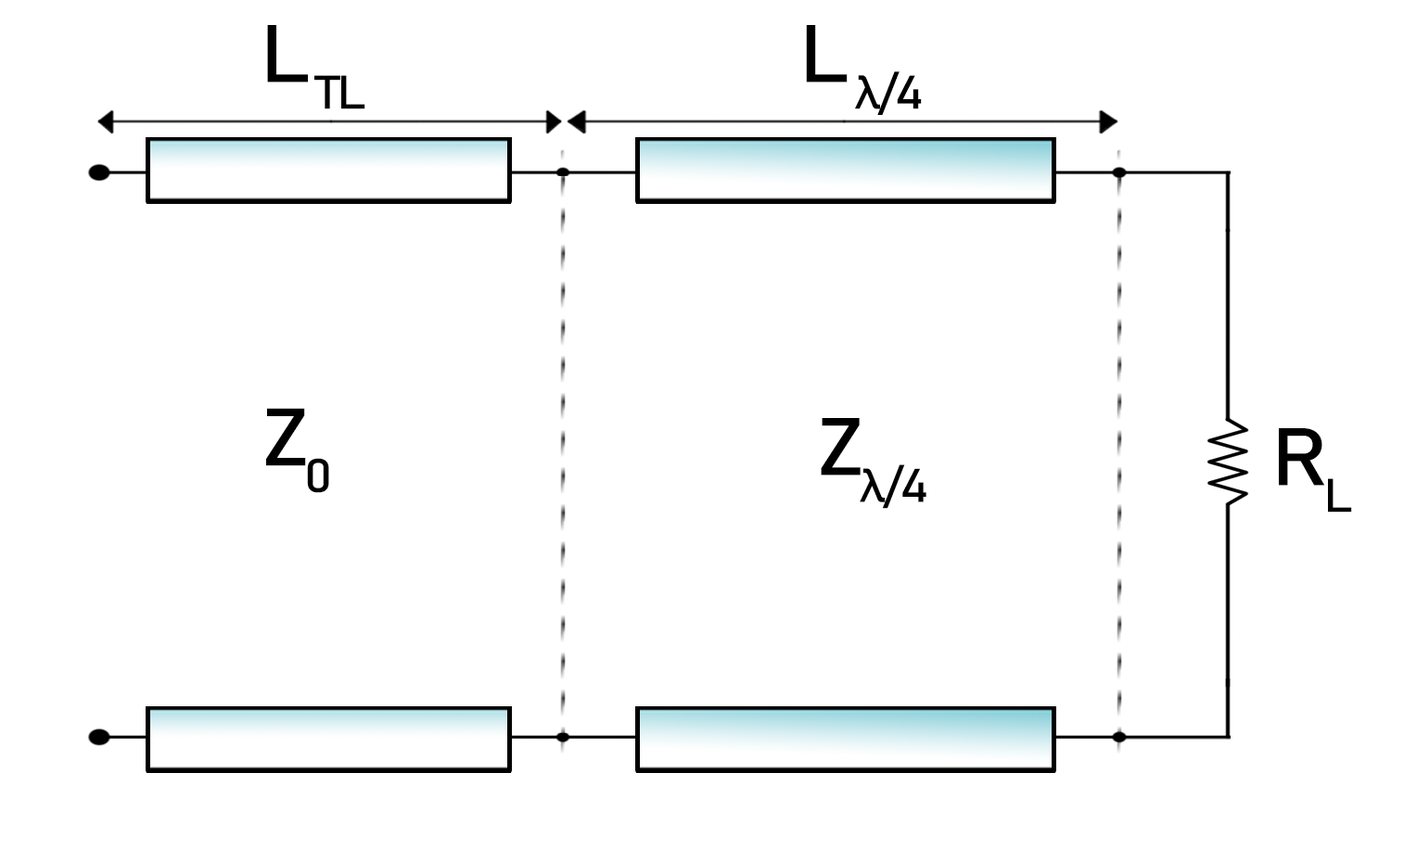
<style>
.page{position:relative;width:1404px;height:849px;background:#ffffff}
.page>*{position:absolute;margin:0}
.t1{font:80.3px "Bahnschrift";letter-spacing:-0.06em;color:#000000;font-weight:bold;font-style:italic;scale:1.1 1}
</style>
<div class="page">
<p class="t1" style="left:267px;top:25px;width:98px;height:84px">L TL</p>
<p class="t1" style="left:806px;top:25px;width:116px;height:90px">L λ/4</p>
<p class="t1" style="left:266px;top:408px;width:63px;height:85px">Z0</p>
<p class="t1" style="left:821px;top:418px;width:105px;height:91px">Zλ/4</p>
<p class="t1" style="left:1279px;top:428px;width:73px;height:85px">RL</p>
</div>
